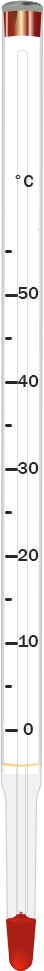
<style>
.page{position:relative;width:44px;height:971px;background:#ffffff}
.page>*{position:absolute;margin:0}
.t1{font:18px "FranklinGothic-Medium";color:#282828}
</style>
<div class="page">
<p class="t1" style="left:15px;top:175px;width:19px;height:12px">°C</p>
<p class="t1" style="left:18px;top:287px;width:21px;height:12px">50</p>
<p class="t1" style="left:18px;top:375px;width:21px;height:12px">40</p>
<p class="t1" style="left:18px;top:462px;width:21px;height:12px">30</p>
<p class="t1" style="left:18px;top:549px;width:21px;height:12px">20</p>
<p class="t1" style="left:18px;top:635px;width:20px;height:12px">10</p>
<p class="t1" style="left:23px;top:723px;width:10px;height:12px">0</p>
</div>
